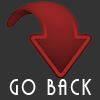
<style>
.page{position:relative;width:100px;height:100px;background:#333333}
.page>*{position:absolute;margin:0}
.t1{font:20px "DKCarambola";letter-spacing:0.18em;color:#ffffff;scale:0.84 1}
</style>
<div class="page">
<p class="t1" style="left:9px;top:79px;width:83px;height:16px">Go back</p>
</div>
